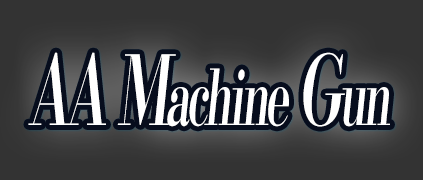
<style>
.page{position:relative;width:423px;height:180px;background:#333333}
.page>*{position:absolute;margin:0}
.t1{font:76.8px "KochoStd-Heavy";letter-spacing:-0.08em;color:#ffffff;font-style:italic;scale:0.58 1}
.t2{font:96px "KochoStd-Heavy";letter-spacing:-0.08em;color:#ffffff;font-style:italic;scale:0.58 1}
</style>
<div class="page">
<p class="t1" style="left:28px;top:52px;width:362px;height:75px"><span class="t2">AA M</span>achine <span class="t2">G</span>un</p>
</div>
